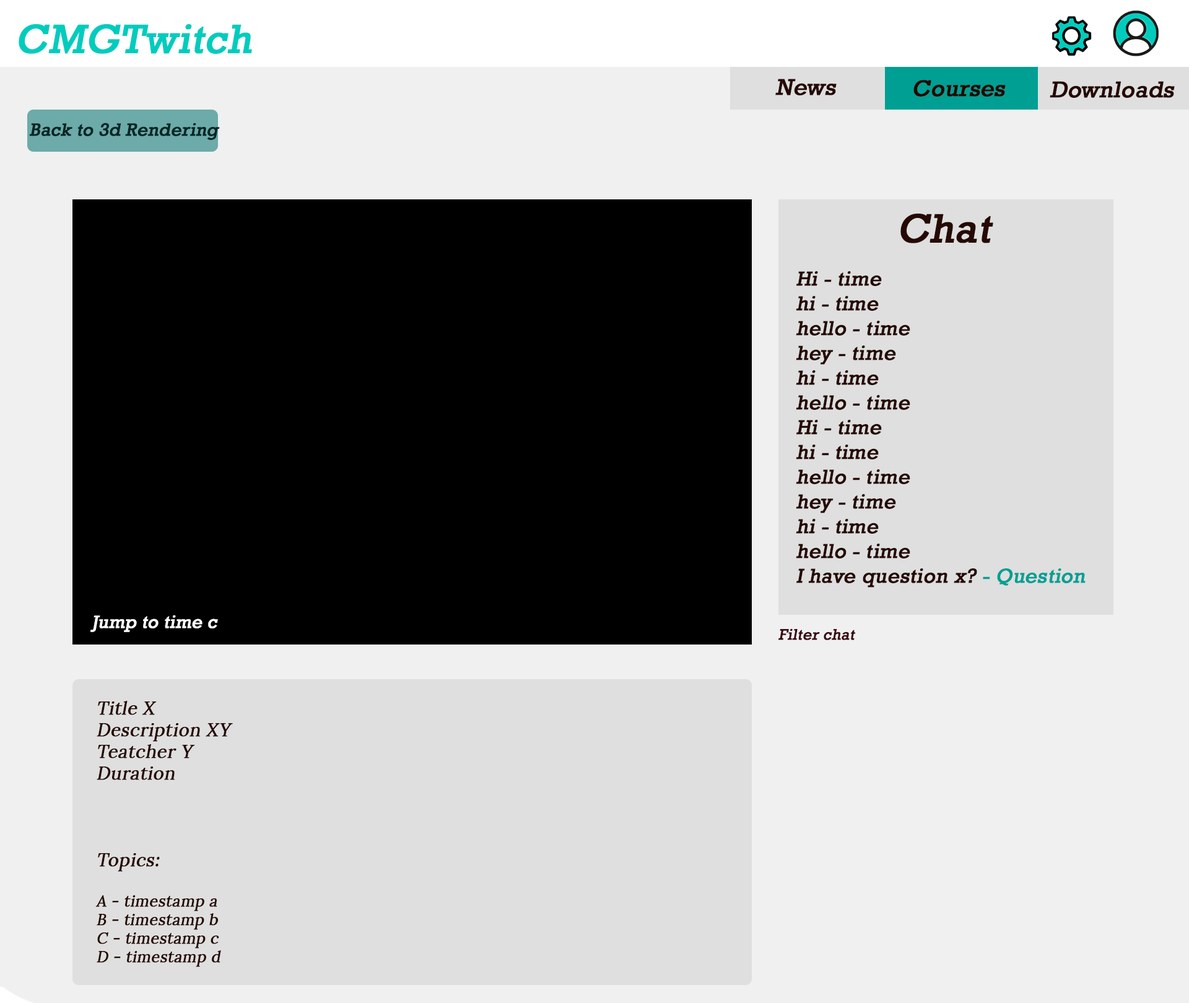
<style>
.page{position:relative;width:1189px;height:1003px;background:#f0f0f0}
.page>*{position:absolute;margin:0}
.t1{font:41.3px "Rockwell";color:#00ccbe;font-weight:bold;font-style:italic}
.t2{font:23.2px "Rockwell";color:#250902;font-weight:bold;font-style:italic}
.t3{font:18.1px "Rockwell";color:#022624;font-weight:bold;font-style:italic}
.t4{font:20.6px "Rockwell";color:#250902;font-weight:bold;font-style:italic}
.t5{font:41.3px "Rockwell";color:#250902;font-weight:bold;font-style:italic}
.t6{font:20.6px "Rockwell";color:#009f93;font-weight:bold;font-style:italic}
.t7{font:18.1px "Rockwell";color:#ffffff;font-weight:bold;font-style:italic}
.t8{font:15.5px "Rockwell";color:#38040e;font-weight:bold;font-style:italic}
.t9{font:15.5px "Lora-Regular";color:#250902;font-weight:bold;font-style:italic}
.t10{font:18.1px "Lora-Regular";color:#250902;font-weight:bold;font-style:italic}
</style>
<div class="page">
<p class="t1" style="left:19px;top:24px;width:233px;height:30px">CMGTwitch</p>
<p class="t2" style="left:775px;top:79px;width:61px;height:16px">News</p>
<p class="t2" style="left:913px;top:80px;width:93px;height:17px">Courses</p>
<p class="t2" style="left:1049px;top:81px;width:126px;height:17px">Downloads</p>
<p class="t3" style="left:29px;top:123px;width:191px;height:17px">Back to 3d Rendering</p>
<p class="t4" style="left:796px;top:214px;width:289px;height:374px;text-align:center"><span class="t5">Chat<br><br></span>Hi - time<br>hi - time<br>hello - time<br>hey - time<br>hi - time<br>hello - time<br>Hi - time<br>hi - time<br>hello - time<br>hey - time<br>hi - time<br>hello - time<br>I have question x? <span class="t6">- Question</span></p>
<p class="t7" style="left:90px;top:615px;width:128px;height:17px">Jump to time c</p>
<p class="t8" style="left:778px;top:628px;width:77px;height:12px">Filter chat</p>
<p class="t9" style="left:95px;top:701px;width:138px;height:266px"><span class="t10"><br>Title X<br>Description XY<br>Teatcher Y<br>Duration<br><br><br><br>Topics:<br><br></span>A - timestamp a<br>B - timestamp b<br>C - timestamp c<br>D - timestamp d</p>
</div>
